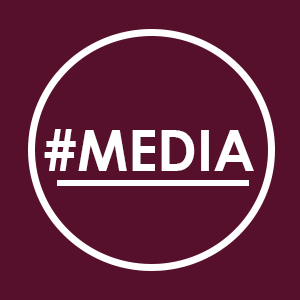
<style>
.page{position:relative;width:300px;height:300px;background:#57102c}
.page>*{position:absolute;margin:0}
.t1{font:56.6px "CenturyGothic-Bold";color:#ffffff}
</style>
<div class="page">
<p class="t1" style="left:44px;top:129px;width:210px;height:42px">#MEDIA</p>
</div>
